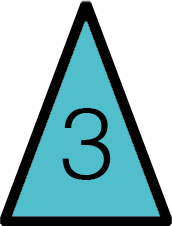
<style>
.page{position:relative;width:172px;height:226px;background:#ffffff}
.page>*{position:absolute;margin:0}
.t1{font:100px "Helvetica-Light";color:#000000}
</style>
<div class="page">
<p class="t1" style="left:62px;top:108px;width:49px;height:72px">3</p>
</div>
